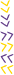
<style>
.page{position:relative;width:14px;height:75px;background:#ffffff}
.page>*{position:absolute;margin:0}
.t1{font:16px "ThrowMyHandsUpintheAir";color:#ffd600;text-transform:uppercase}
.t2{font:16px "ThrowMyHandsUpintheAir";color:#65408a;text-transform:uppercase}
</style>
<div class="page">
<p class="t1" style="left:0px;top:0px;width:10px;height:13px;rotate:90deg">&gt;&gt;</p>
<p class="t2" style="left:0px;top:14px;width:10px;height:13px;rotate:90deg">&gt;&gt;</p>
<p class="t2" style="left:0px;top:31px;width:14px;height:10px">&gt;&gt;</p>
<p class="t2" style="left:0px;top:54px;width:14px;height:9px;rotate:-180deg">&gt;&gt;</p>
<p class="t1" style="left:0px;top:42px;width:14px;height:10px">&gt;&gt;</p>
<p class="t1" style="left:0px;top:65px;width:14px;height:9px;rotate:-180deg">&gt;&gt;</p>
</div>
